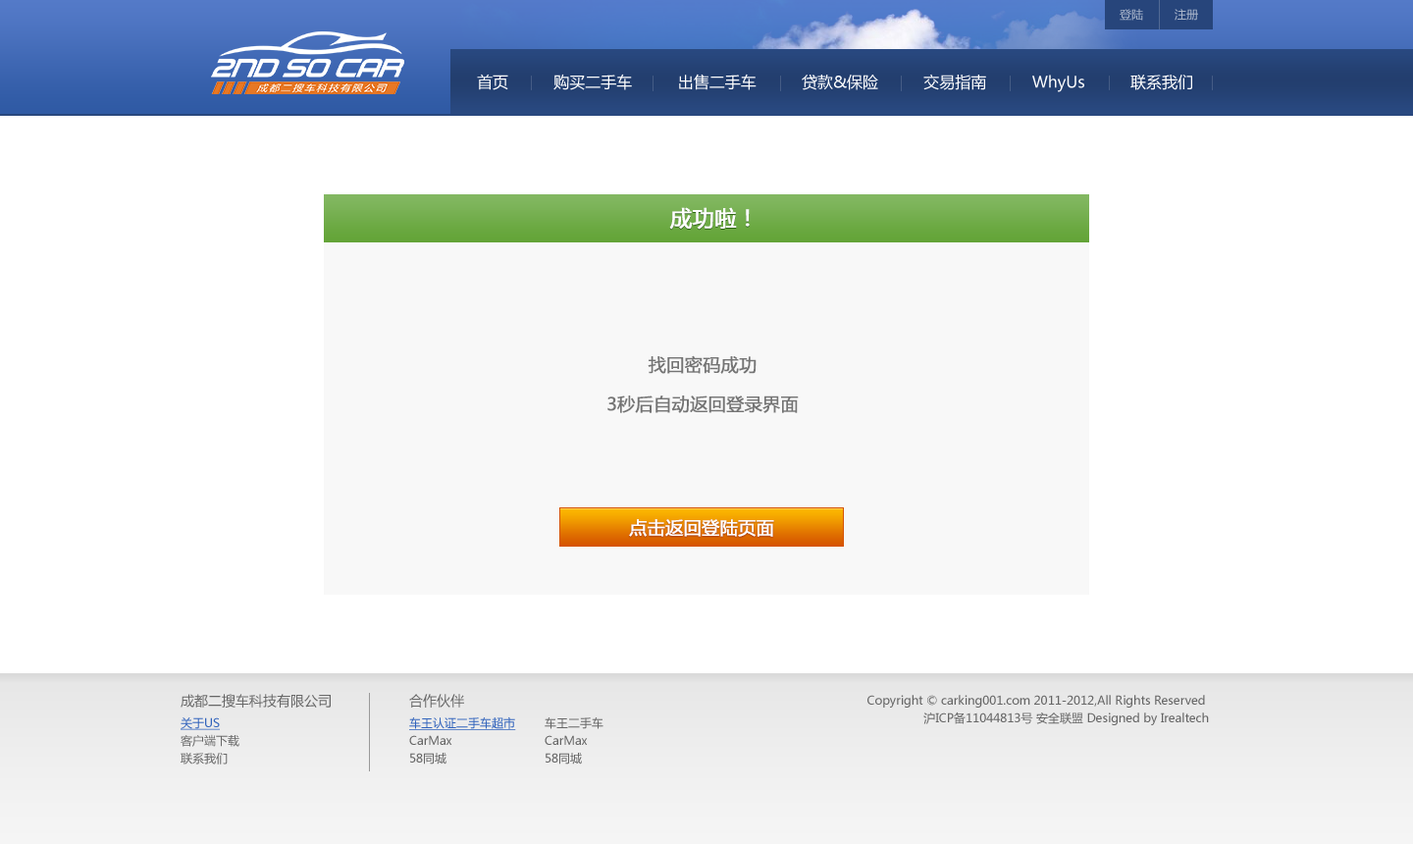
<style>
.page{position:relative;width:1413px;height:844px;background:#ffffff}
.page>*{position:absolute;margin:0}
.t1{font:11.8px "MicrosoftYaHei";color:#a9b5ca}
.t2{font:15.7px "MicrosoftYaHei";color:#ffffff}
.t3{font:21.6px "MicrosoftYaHei";color:#ffffff;text-transform:uppercase;font-weight:bold}
.t4{font:17.7px/39.3px "MicrosoftYaHei";color:#747474;text-transform:uppercase;font-weight:bold}
.t5{font:17.7px "MicrosoftYaHei";color:#ffffff;text-transform:uppercase;font-weight:bold}
.t6{font:13.7px "MicrosoftYaHei";color:#666666}
.t7{font:11.8px/17.7px "MicrosoftYaHei";color:#666666}
.t8{font:13.7px/23.6px "MicrosoftYaHei";color:#666666}
.t9{font:11.8px/17.7px "MicrosoftYaHei";color:#3163bc;text-decoration:underline}
</style>
<div class="page">
<p class="t1" style="left:1120px;top:9px;width:78px;height:12px">登陆         注册</p>
<p class="t2" style="left:477px;top:74px;width:715px;height:18px">首页 购买二手车 出售二手车 贷款&amp;保险 交易指南 WhyUs 联系我们</p>
<p class="t3" style="left:669px;top:207px;width:81px;height:23px">成功啦！</p>
<p class="t4" style="left:607px;top:355px;width:192px;height:58px;text-align:center">找回密码成功<br>3秒后自动返回登录界面</p>
<p class="t5" style="left:629px;top:519px;width:145px;height:18px">点击返回登陆页面</p>
<p class="t5" style="left:629px;top:519px;width:145px;height:18px">点击返回登陆页面</p>
<p class="t6" style="left:181px;top:694px;width:150px;height:13px">成都二搜车科技有限公司</p>
<p class="t7" style="left:409px;top:694px;width:107px;height:70px"><span class="t8">合作伙伴<br></span><span class="t9">车王认证二手车超市<br></span>CarMax<br>58同城</p>
<p class="t7" style="left:867px;top:695px;width:342px;height:30px;text-align:right">Copyright © carking001.com 2011-2012,All Rights Reserved <br>沪ICP备11044813号 安全联盟 Designed by Irealtech</p>
<p class="t7" style="left:181px;top:717px;width:58px;height:47px"><span class="t9">关于US<br></span>客户端下载<br>联系我们</p>
<p class="t7" style="left:545px;top:717px;width:58px;height:47px">车王二手车<br>CarMax<br>58同城</p>
</div>
